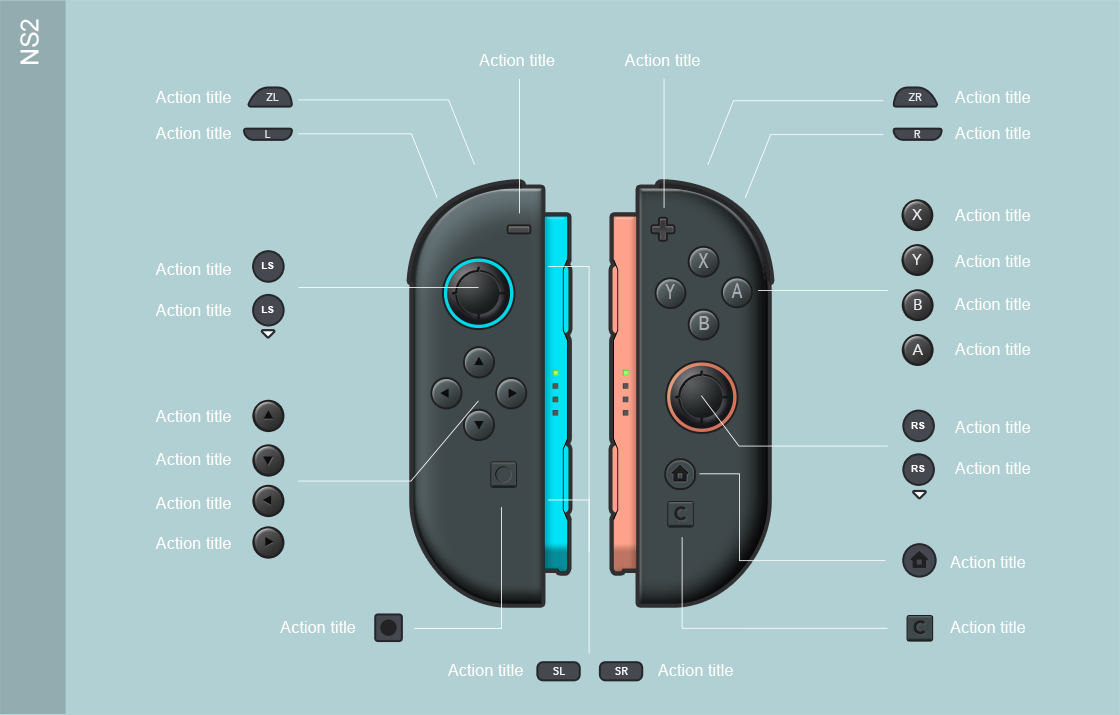
<style>
.page{position:relative;width:1120px;height:715px;background:#b0d0d3}
.page>*{position:absolute;margin:0}
.t1{font:25px "ArialMT";color:#ffffff}
.t2{font:16.4px "ArialMT";color:#ffffff}
.t3{font:10.9px "Avenir-Medium";color:#e7e9eb}
.t4{font:15.5px "Avenir-Medium";color:#e7e9eb}
.t5{font:18.7px "Avenir-Medium";color:#aaadb3;scale:0.83 1}
.t6{font:10.5px "Arial-BoldMT";color:#ffffff}
.t7{font:18.7px "Avenir-Medium";color:#aaadb3;scale:1.04 1}
.t8{font:19.1px "Avenir-Black";letter-spacing:0.01em;color:#202022}
.t9{font:11.2px "Avenir-Medium";color:#ffffff}
</style>
<div class="page">
<p class="t1" style="left:20px;top:19px;width:19px;height:45px;rotate:-90deg">NS2</p>
<p class="t2" style="left:479px;top:54px;width:76px;height:12px">Action title</p>
<p class="t2" style="left:624px;top:54px;width:76px;height:12px">Action title</p>
<p class="t2" style="left:155px;top:91px;width:76px;height:12px">Action title</p>
<p class="t3" style="left:266px;top:93px;width:13px;height:8px">ZL</p>
<p class="t3" style="left:908px;top:93px;width:14px;height:8px">ZR</p>
<p class="t2" style="left:955px;top:91px;width:76px;height:12px">Action title</p>
<p class="t2" style="left:155px;top:127px;width:76px;height:12px">Action title</p>
<p class="t3" style="left:265px;top:130px;width:6px;height:8px">L</p>
<p class="t3" style="left:914px;top:130px;width:7px;height:8px">R</p>
<p class="t2" style="left:955px;top:127px;width:76px;height:12px">Action title</p>
<p class="t4" style="left:912px;top:209px;width:10px;height:11px">X</p>
<p class="t2" style="left:955px;top:209px;width:76px;height:12px">Action title</p>
<p class="t5" style="left:698px;top:253px;width:11px;height:15px">X</p>
<p class="t4" style="left:912px;top:254px;width:10px;height:11px">Y</p>
<p class="t2" style="left:955px;top:255px;width:76px;height:12px">Action title</p>
<p class="t2" style="left:155px;top:263px;width:76px;height:12px">Action title</p>
<p class="t6" style="left:261px;top:262px;width:13px;height:7px">LS</p>
<p class="t5" style="left:665px;top:284px;width:10px;height:15px">Y</p>
<p class="t5" style="left:731px;top:283px;width:12px;height:15px">A</p>
<p class="t2" style="left:155px;top:304px;width:76px;height:12px">Action title</p>
<p class="t4" style="left:914px;top:299px;width:8px;height:11px">B</p>
<p class="t2" style="left:955px;top:298px;width:76px;height:12px">Action title</p>
<p class="t6" style="left:261px;top:306px;width:13px;height:7px">LS</p>
<p class="t7" style="left:699px;top:316px;width:11px;height:14px">B</p>
<p class="t4" style="left:912px;top:344px;width:11px;height:11px">A</p>
<p class="t2" style="left:955px;top:343px;width:76px;height:12px">Action title</p>
<p class="t2" style="left:155px;top:410px;width:76px;height:12px">Action title</p>
<p class="t6" style="left:911px;top:422px;width:14px;height:7px">RS</p>
<p class="t2" style="left:955px;top:421px;width:76px;height:12px">Action title</p>
<p class="t2" style="left:155px;top:453px;width:76px;height:12px">Action title</p>
<p class="t2" style="left:955px;top:462px;width:76px;height:12px">Action title</p>
<p class="t6" style="left:911px;top:465px;width:14px;height:7px">RS</p>
<p class="t2" style="left:155px;top:497px;width:76px;height:12px">Action title</p>
<p class="t8" style="left:674px;top:506px;width:13px;height:15px">C</p>
<p class="t2" style="left:155px;top:537px;width:76px;height:12px">Action title</p>
<p class="t2" style="left:950px;top:556px;width:76px;height:12px">Action title</p>
<p class="t2" style="left:280px;top:621px;width:76px;height:12px">Action title</p>
<p class="t8" style="left:913px;top:620px;width:13px;height:15px">C</p>
<p class="t2" style="left:950px;top:621px;width:76px;height:12px">Action title</p>
<p class="t2" style="left:448px;top:664px;width:75px;height:12px">Action title</p>
<p class="t2" style="left:658px;top:664px;width:75px;height:12px">Action title</p>
<p class="t9" style="left:553px;top:667px;width:12px;height:8px">SL</p>
<p class="t9" style="left:615px;top:667px;width:13px;height:8px">SR</p>
</div>
